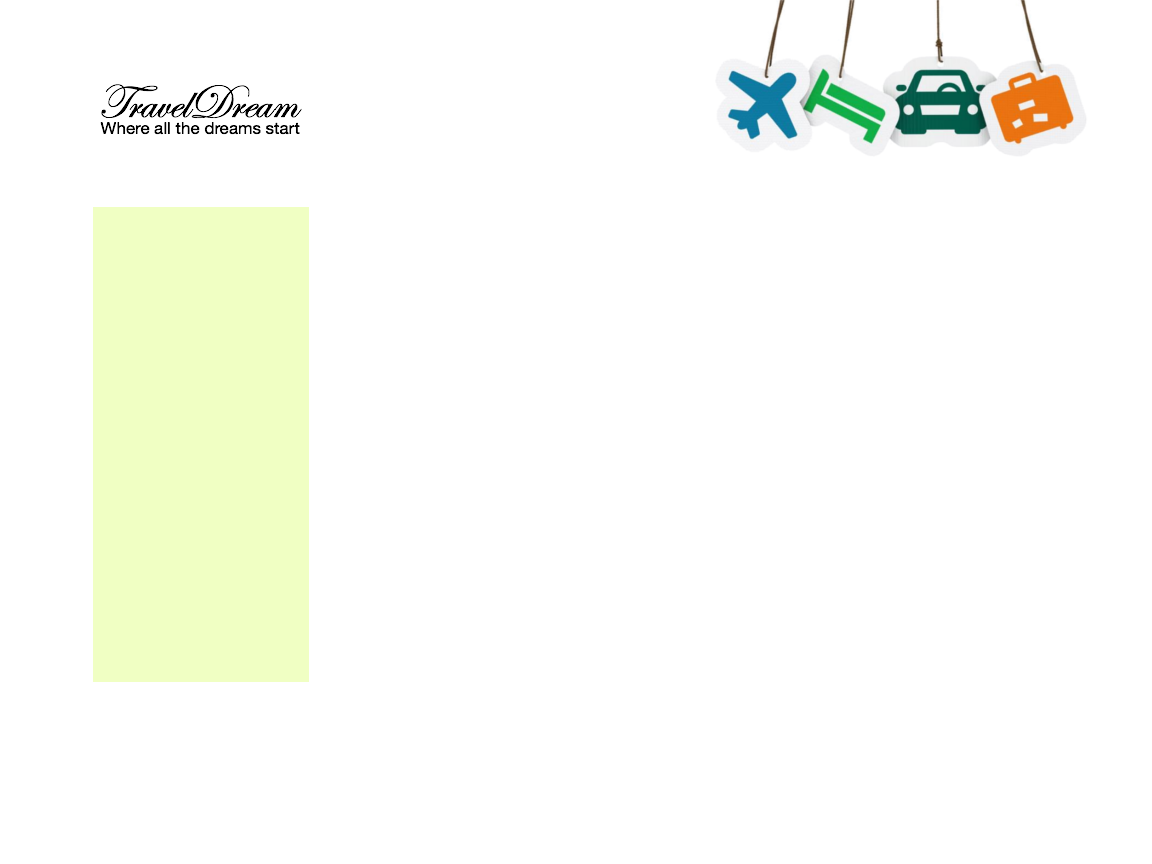
<style>
.page{position:relative;width:1152px;height:864px;background:#ffffff}
.page>*{position:absolute;margin:0}
.t1{font:48px "EdwardianScriptITC";color:#000000}
.t2{font:17px "HelveticaNeue";color:#000000}
</style>
<div class="page">
<p class="t1" style="left:101px;top:84px;width:201px;height:35px">TravelDream</p>
<p class="t2" style="left:100px;top:122px;width:200px;height:13px">Where all the dreams start</p>
</div>
